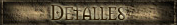
<style>
.page{position:relative;width:177px;height:25px}
.page>*{position:absolute;margin:0}
.t1{font:20px "Morpheus"}
</style>
<div class="page">
<p class="t1" style="left:50px;top:5px;width:76px;height:15px">Detalles</p>
</div>
